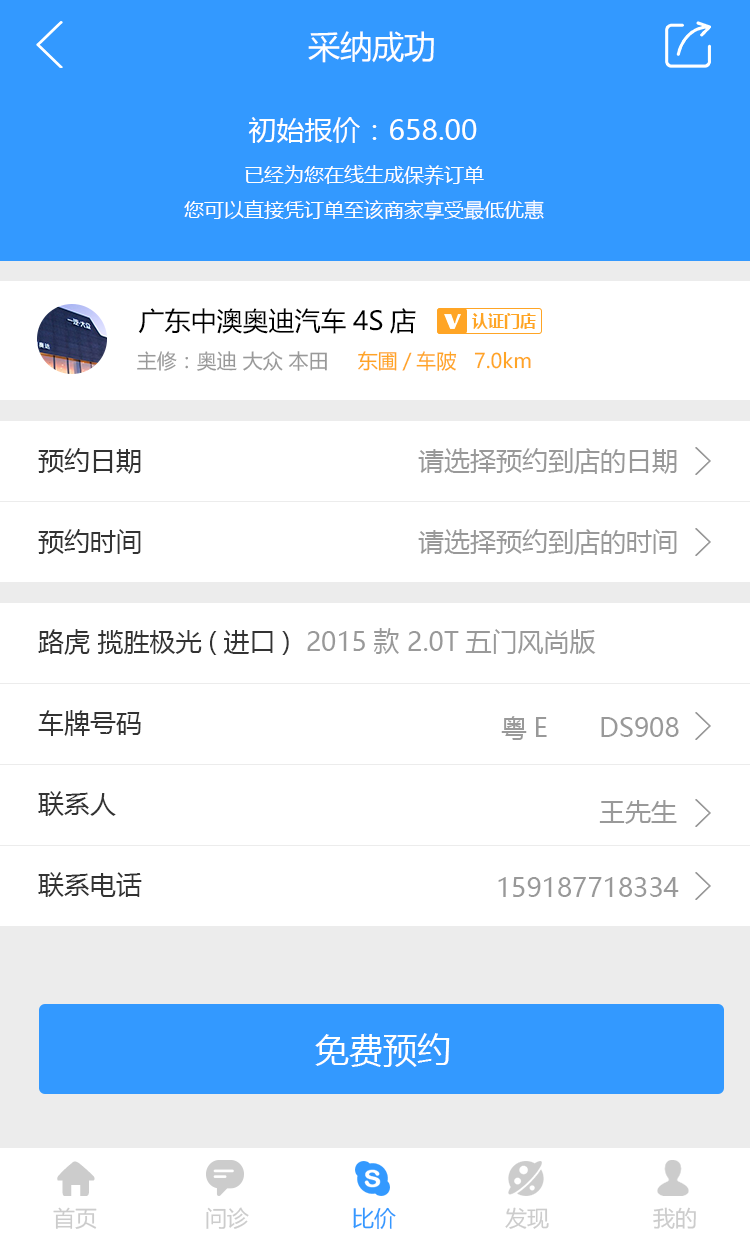
<style>
.page{position:relative;width:750px;height:1246px;background:#ffffff}
.page>*{position:absolute;margin:0}
.t1{font:32px "MicrosoftYaHei";color:#ffffff}
.t2{font:28px "MicrosoftYaHei";color:#ffffff}
.t3{font:20px "MicrosoftYaHei";color:#ffffff}
.t4{font:26px "MicrosoftYaHei";color:#000000}
.t5{font:20px "MicrosoftYaHei";color:#999999}
.t6{font:20px "MicrosoftYaHei";color:#ffa525}
.t7{font:26px "MicrosoftYaHei";color:#333333}
.t8{font:26px "MicrosoftYaHei";color:#999999}
.t9{font:34px "MicrosoftYaHei";color:#ffffff}
.t10{font:22px "MicrosoftYaHei";color:#cccccc}
.t11{font:22px "MicrosoftYaHei";color:#3399ff}
</style>
<div class="page">
<p class="t1" style="left:308px;top:31px;width:126px;height:32px">采纳成功</p>
<p class="t2" style="left:248px;top:117px;width:229px;height:26px">初始报价：658.00</p>
<p class="t3" style="left:184px;top:165px;width:360px;height:55px;text-align:center">已经为您在线生成保养订单<br>您可以直接凭订单至该商家享受最低优惠</p>
<p class="t4" style="left:138px;top:308px;width:278px;height:26px">广东中澳奥迪汽车4S店</p>
<p class="t5" style="left:137px;top:351px;width:190px;height:20px">主修：奥迪 大众 本田</p>
<p class="t6" style="left:358px;top:351px;width:173px;height:20px">东圃/车陂   7.0km</p>
<p class="t7" style="left:38px;top:448px;width:103px;height:26px">预约日期</p>
<p class="t8" style="left:418px;top:448px;width:259px;height:26px">请选择预约到店的日期</p>
<p class="t7" style="left:38px;top:529px;width:103px;height:25px">预约时间</p>
<p class="t8" style="left:418px;top:529px;width:259px;height:26px">请选择预约到店的时间</p>
<p class="t8" style="left:38px;top:628px;width:558px;height:27px"><span class="t7">路虎 揽胜极光(进口)  </span>2015款 2.0T五门风尚版</p>
<p class="t7" style="left:38px;top:710px;width:103px;height:26px">车牌号码</p>
<p class="t8" style="left:501px;top:716px;width:46px;height:24px">粤E</p>
<p class="t8" style="left:601px;top:717px;width:78px;height:20px">DS908</p>
<p class="t7" style="left:38px;top:791px;width:78px;height:25px">联系人</p>
<p class="t8" style="left:599px;top:800px;width:78px;height:24px">王先生</p>
<p class="t7" style="left:38px;top:872px;width:104px;height:25px">联系电话</p>
<p class="t8" style="left:498px;top:877px;width:181px;height:20px">159187718334</p>
<p class="t9" style="left:315px;top:1033px;width:135px;height:34px">免费预约</p>
<p class="t10" style="left:53px;top:1207px;width:44px;height:22px">首页</p>
<p class="t10" style="left:206px;top:1207px;width:43px;height:22px">问诊</p>
<p class="t11" style="left:353px;top:1207px;width:43px;height:22px">比价</p>
<p class="t10" style="left:505px;top:1207px;width:44px;height:22px">发现</p>
<p class="t10" style="left:653px;top:1207px;width:43px;height:22px">我的</p>
</div>
